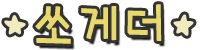
<style>
.page{position:relative;width:200px;height:50px;background:#ffffff}
.page>*{position:absolute;margin:0}
.t1{font:52.5px "Goyang";letter-spacing:0.12em;color:#e8d96c;font-weight:bold;scale:0.91 1}
.t2{font:26.9px "Goyang";letter-spacing:0.12em;color:#f1ebc0;font-weight:bold}
</style>
<div class="page">
<p class="t1" style="left:35px;top:4px;width:127px;height:40px">쏘게더</p>
<p class="t2" style="left:4px;top:15px;width:22px;height:20px;rotate:-30deg">★</p>
<p class="t2" style="left:173px;top:14px;width:21px;height:22px;rotate:45deg">★</p>
</div>
